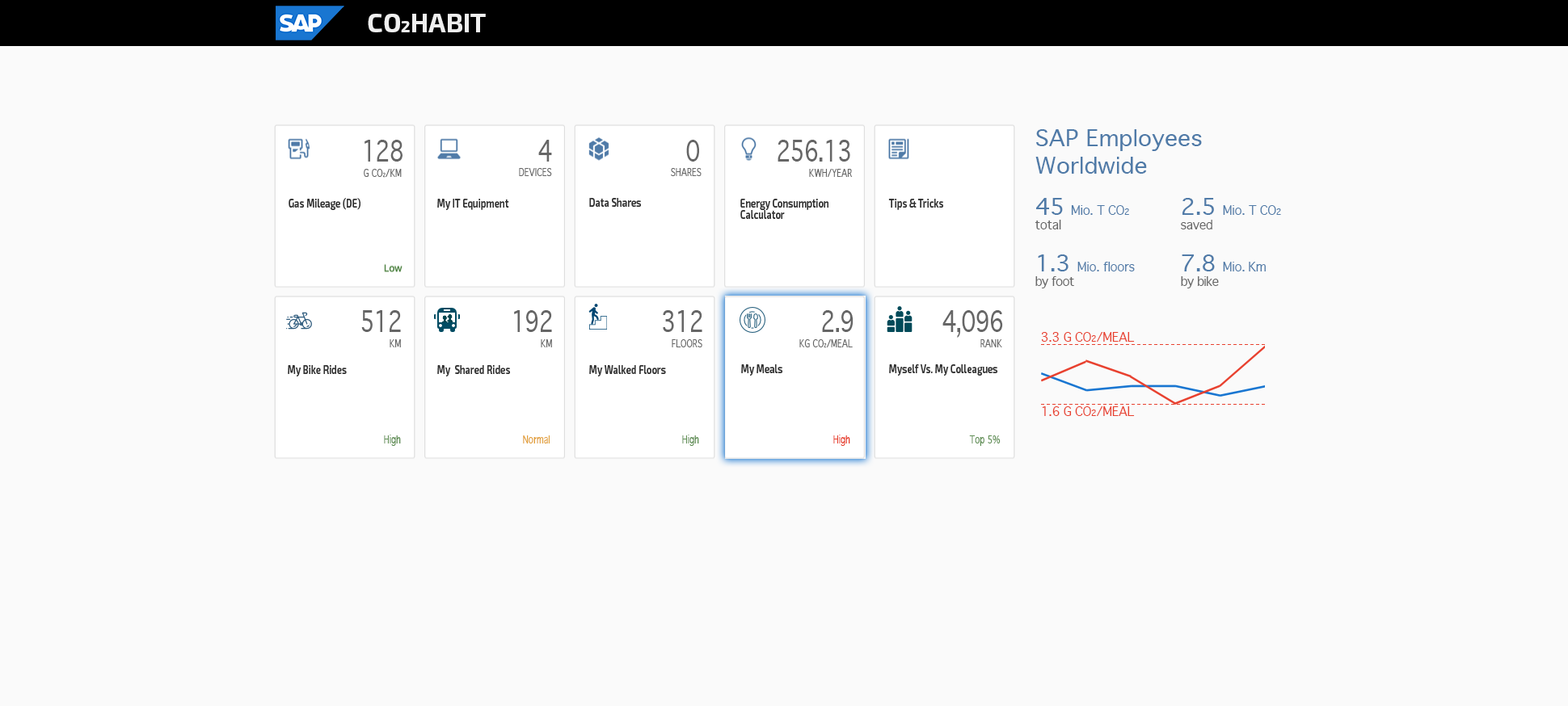
<style>
.page{position:relative;width:1568px;height:706px;background:#fafafa}
.page>*{position:absolute;margin:0}
.t1{font:26.7px "Exo2-Bold";color:#efefef}
.t2{font:16.2px "Exo2-Bold";color:#efefef}
.t3{font:22.6px "Geneva";color:#507ba8}
.t4{font:22.6px "Geneva";letter-spacing:-0.025em;color:#507ba8}
.t5{font:12.1px "Geneva";letter-spacing:-0.025em;color:#507ba8}
.t6{font:8.1px "Geneva";letter-spacing:-0.025em;color:#507ba8}
.t7{font:12.1px "Geneva";letter-spacing:-0.025em;color:#666666}
.t8{font:12.1px "Geneva";letter-spacing:-0.05em;color:#507ba8}
.t9{font:12.1px "Geneva";letter-spacing:-0.05em;color:#666666}
.t10{font:29.4px "Geneva";letter-spacing:-0.05em;color:#666666;scale:0.77 1}
.t11{font:29.4px "Geneva";color:#666666;scale:0.77 1}
.t12{font:10.5px "Geneva";color:#666666;scale:0.77 1}
.t13{font:5.3px "Geneva";color:#666666;scale:0.77 1}
.t14{font:12.1px "Exo2-SemiBold";color:#323232;scale:0.77 1}
.t15{font:12.1px "Geneva";letter-spacing:-0.025em;color:#e8412f}
.t16{font:8.1px "Geneva";letter-spacing:-0.025em;color:#e8412f}
.t17{font:10.5px "Geneva";color:#619056;scale:0.77 1}
.t18{font:10.5px "Geneva";color:#e2a039;scale:0.77 1}
.t19{font:10.5px "Geneva";color:#e8412f;scale:0.77 1}
</style>
<div class="page">
<p class="t1" style="left:368px;top:14px;width:118px;height:18px">CO<span class="t2">2</span>HABIT</p>
<p class="t3" style="left:1035px;top:129px;width:246px;height:160px">SAP Employees<br>Worldwide<br><br><br><br><span class="t4">45 </span><span class="t5">Mio. T CO</span><span class="t6">2  </span><span class="t4">2.5 </span><span class="t5">Mio. T CO</span><span class="t6">2<br></span><span class="t7">total     saved<br><br><br><br></span><span class="t4">1.3 </span><span class="t5">Mio. floors  </span><span class="t4">7.8 </span><span class="t5">Mio</span><span class="t8">. Km<br></span><span class="t9">by foot    by bike</span></p>
<p class="t10" style="left:365px;top:140px;width:38px;height:22px">128</p>
<p class="t11" style="left:538px;top:140px;width:14px;height:22px">4</p>
<p class="t11" style="left:686px;top:140px;width:13px;height:22px">0</p>
<p class="t10" style="left:778px;top:140px;width:72px;height:22px">256.13</p>
<p class="t12" style="left:364px;top:169px;width:38px;height:9px">G CO<span class="t13">2</span>/KM</p>
<p class="t12" style="left:519px;top:168px;width:33px;height:8px">DEVICES</p>
<p class="t12" style="left:671px;top:168px;width:31px;height:8px">SHARES</p>
<p class="t12" style="left:809px;top:169px;width:44px;height:8px">KWH/YEAR</p>
<p class="t14" style="left:289px;top:198px;width:71px;height:12px">Gas Mileage (DE)</p>
<p class="t14" style="left:437px;top:199px;width:72px;height:11px">My IT Equipment</p>
<p class="t14" style="left:589px;top:198px;width:52px;height:9px">Data Shares</p>
<p class="t14" style="left:740px;top:199px;width:88px;height:20px">Energy Consumption <br>Calculator</p>
<p class="t14" style="left:888px;top:199px;width:55px;height:11px">Tips &amp; Tricks</p>
<p class="t10" style="left:361px;top:310px;width:40px;height:22px">512</p>
<p class="t10" style="left:514px;top:310px;width:38px;height:22px">192</p>
<p class="t10" style="left:663px;top:310px;width:39px;height:22px">312</p>
<p class="t10" style="left:822px;top:310px;width:32px;height:22px">2.9</p>
<p class="t10" style="left:942px;top:310px;width:61px;height:28px">4,096</p>
<p class="t12" style="left:390px;top:339px;width:11px;height:9px">KM</p>
<p class="t12" style="left:541px;top:339px;width:11px;height:9px">KM</p>
<p class="t12" style="left:672px;top:339px;width:30px;height:9px">FLOORS</p>
<p class="t12" style="left:799px;top:339px;width:54px;height:9px">KG CO<span class="t13">2</span>/MEAL</p>
<p class="t12" style="left:980px;top:339px;width:22px;height:9px">RANK</p>
<p class="t15" style="left:1041px;top:332px;width:94px;height:10px">3.3 G CO<span class="t16">2</span>/MEAL</p>
<p class="t14" style="left:288px;top:365px;width:59px;height:12px">My Bike Rides</p>
<p class="t14" style="left:437px;top:365px;width:73px;height:12px">My  Shared Rides</p>
<p class="t14" style="left:589px;top:365px;width:77px;height:12px">My Walked Floors</p>
<p class="t14" style="left:741px;top:365px;width:41px;height:11px">My Meals</p>
<p class="t14" style="left:889px;top:365px;width:108px;height:11px">Myself Vs. My Colleagues</p>
<p class="t15" style="left:1042px;top:407px;width:93px;height:9px">1.6 G CO<span class="t16">2</span>/MEAL</p>
<p class="t17" style="left:384px;top:435px;width:17px;height:11px">High</p>
<p class="t18" style="left:523px;top:436px;width:27px;height:8px">Normal</p>
<p class="t17" style="left:682px;top:435px;width:17px;height:11px">High</p>
<p class="t19" style="left:833px;top:435px;width:17px;height:11px">High</p>
<p class="t17" style="left:969px;top:436px;width:32px;height:10px">Top 5%</p>
</div>
